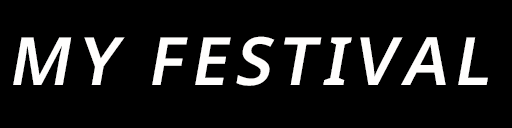
<style>
.page{position:relative;width:512px;height:128px;background:#000000}
.page>*{position:absolute;margin:0}
.t1{font:66.7px "NotoSans-SemiBold";letter-spacing:0.1em;color:#fffefd;font-style:italic}
</style>
<div class="page">
<p class="t1" style="left:13px;top:36px;width:475px;height:50px">MY FESTIVAL</p>
</div>
